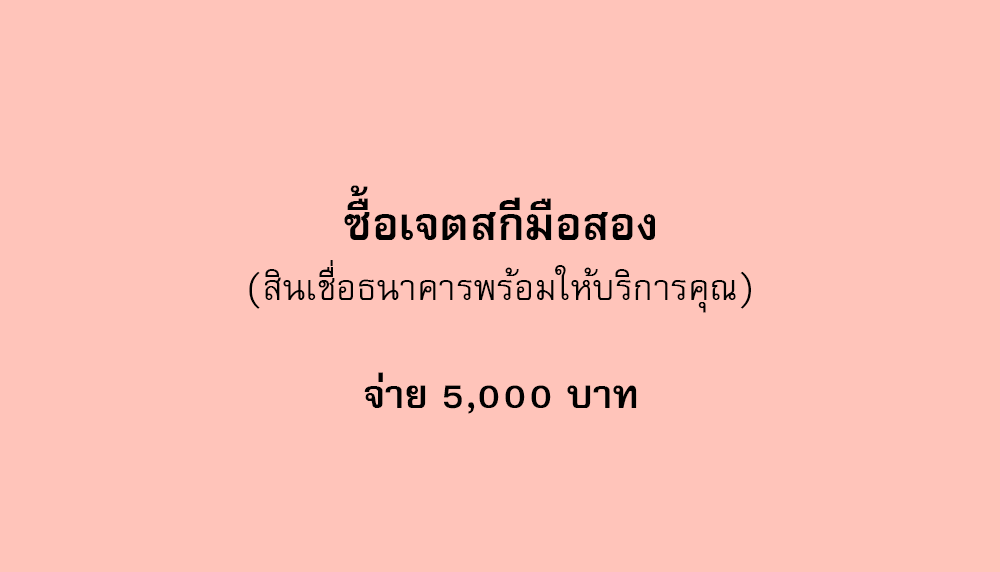
<style>
.page{position:relative;width:1000px;height:572px;background:#ffc4ba}
.page>*{position:absolute;margin:0}
.t1{font:64px "FreesiaUPCBold";color:#000000}
.t2{font:50px "FreesiaUPC";color:#000000}
.t3{font:56px "FreesiaUPCBold";color:#000000}
</style>
<div class="page">
<p class="t1" style="left:344px;top:185px;width:311px;height:55px">ซื้อเจตสกีมือสอง</p>
<p class="t2" style="left:249px;top:260px;width:502px;height:53px">(สินเชื่อธนาคารพร้อมให้บริการคุณ)</p>
<p class="t3" style="left:364px;top:372px;width:273px;height:42px">จ่าย 5,000 บาท</p>
</div>
